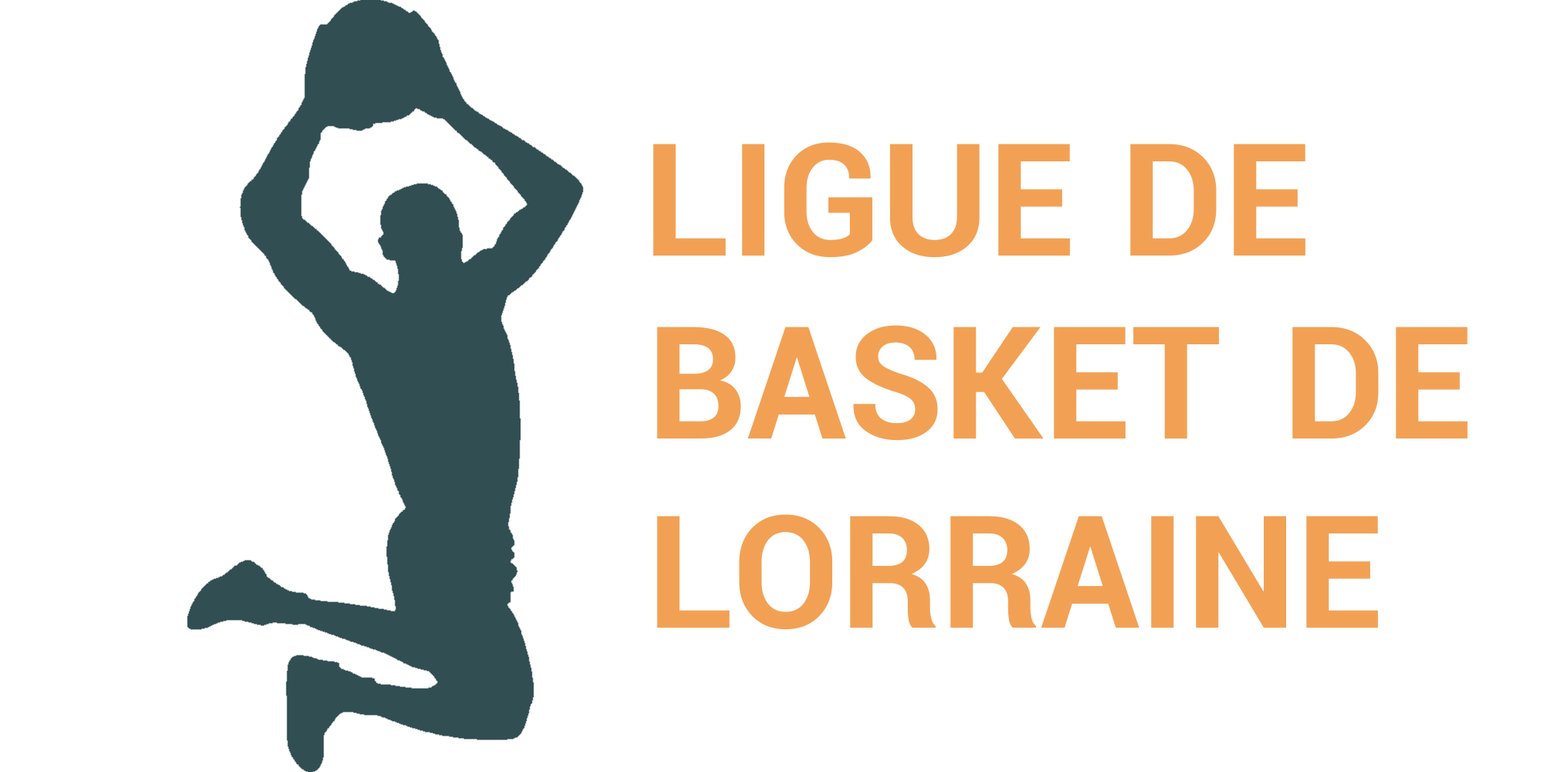
<style>
.page{position:relative;width:1544px;height:772px;background:#ffffff}
.page>*{position:absolute;margin:0}
.t1{font:156.9px "Roboto-Bold";color:#f2a154}
</style>
<div class="page">
<p class="t1" style="left:657px;top:325px;width:562px;height:116px">BASKET</p>
<p class="t1" style="left:1293px;top:327px;width:175px;height:112px">DE</p>
<p class="t1" style="left:657px;top:514px;width:721px;height:116px">LORRAINE</p>
</div>
